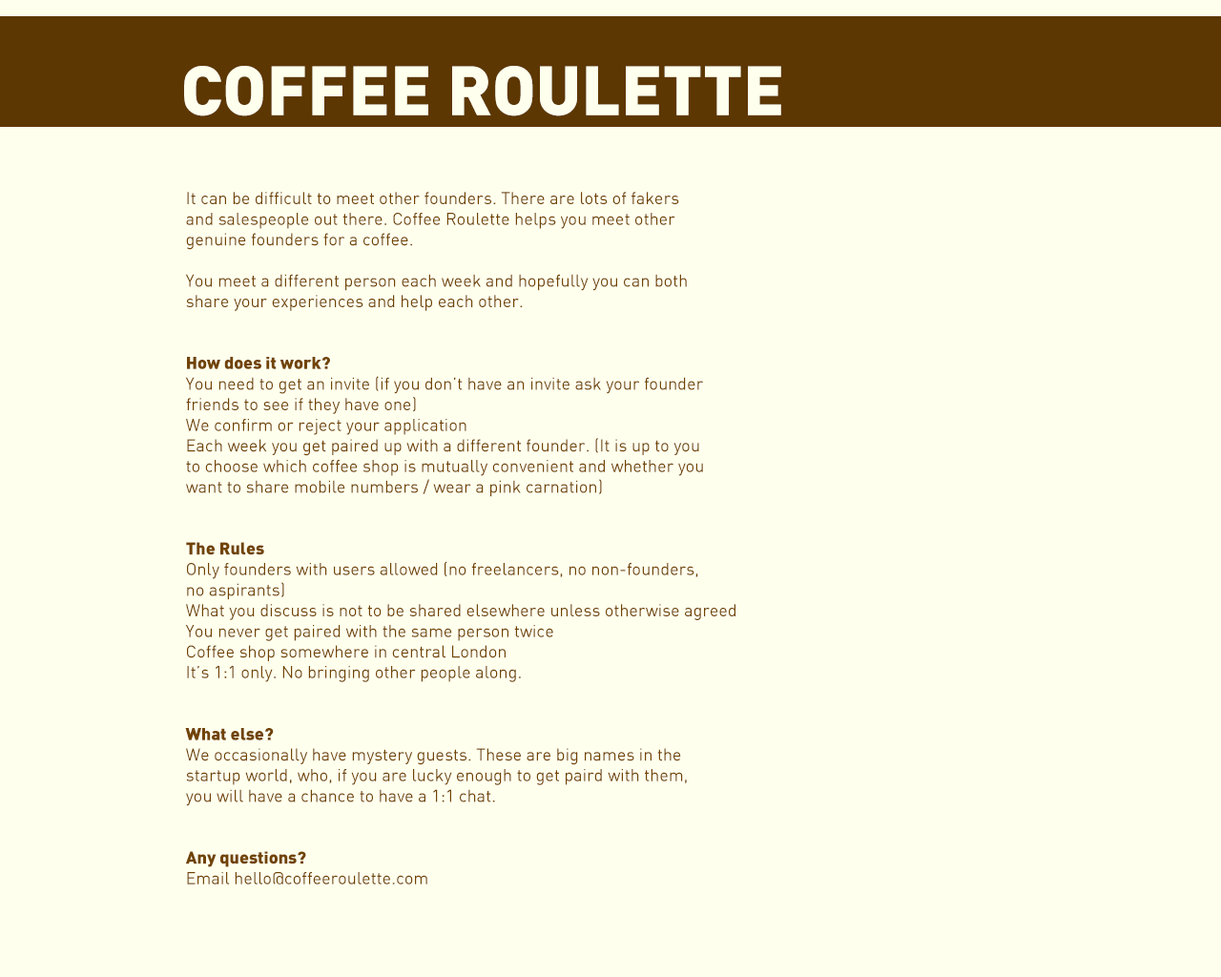
<style>
.page{position:relative;width:1221px;height:977px;background:#ffffee}
.page>*{position:absolute;margin:0}
.t1{font:68.7px "DIN-Black";color:#ffffee;font-variant:small-caps}
.t2{font:17.2px "DIN-Regular";color:#714301}
.t3{font:17.2px "DIN-Black";color:#714301}
</style>
<div class="page">
<p class="t1" style="left:184px;top:66px;width:597px;height:50px">COFFEE ROULETTE</p>
<p class="t2" style="left:185px;top:192px;width:550px;height:692px">It can be difficult to meet other founders. There are lots of fakers <br>and salespeople out there. Coffee Roulette helps you meet other <br>genuine founders for a coffee. <br><br>You meet a different person each week and hopefully you can both <br>share your experiences and help each other.<br><span class="t3"><br><br>How does it work?<br></span>You need to get an invite (if you don’t have an invite ask your founder <br>friends to see if they have one)<br>We confirm or reject your application<br>Each week you get paired up with a different founder. (It is up to you <br>to choose which coffee shop is mutually convenient and whether you <br>want to share mobile numbers / wear a pink carnation)<br><span class="t3"><br><br>The Rules<br></span>Only founders with users allowed (no freelancers, no non-founders, <br>no aspirants)<br>What you discuss is not to be shared elsewhere unless otherwise agreed<br>You never get paired with the same person twice<br>Coffee shop somewhere in central London<br>It’s 1:1 only. No bringing other people along.<br><span class="t3"><br><br>What else?<br></span>We occasionally have mystery guests. These are big names in the <br>startup world, who, if you are lucky enough to get paird with them,<br>you will have a chance to have a 1:1 chat.<br><br><span class="t3"><br>Any questions?<br></span>Email hello@coffeeroulette.com</p>
</div>
